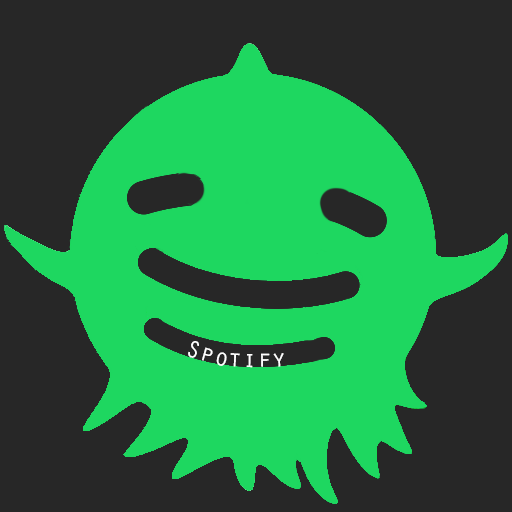
<style>
.page{position:relative;width:512px;height:512px;background:#272727}
.page>*{position:absolute;margin:0}
.t1{font:25px "OratorStd";color:#ffffff}
</style>
<div class="page">
<p class="t1" style="left:188px;top:341px;width:96px;height:27px">Spotify</p>
</div>
